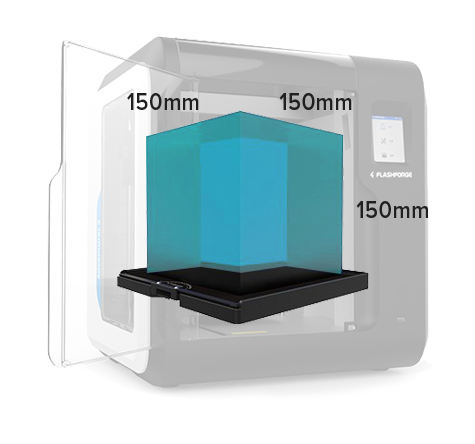
<style>
.page{position:relative;width:475px;height:444px;background:#ffffff}
.page>*{position:absolute;margin:0}
.t1{font:24.7px "ProximaNova-Semibold";letter-spacing:0.02em;color:#202020;scale:0.89 1}
</style>
<div class="page">
<p class="t1" style="left:127px;top:93px;width:72px;height:17px">150mm</p>
<p class="t1" style="left:279px;top:93px;width:73px;height:17px">150mm</p>
<p class="t1" style="left:356px;top:201px;width:72px;height:17px">150mm</p>
</div>
